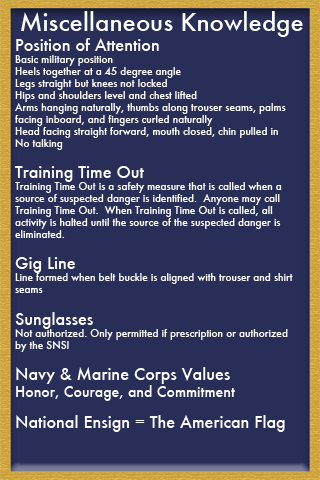
<style>
.page{position:relative;width:320px;height:480px;background:#292e59}
.page>*{position:absolute;margin:0}
.t1{font:24px "Futura-Medium";color:#ffffff}
.t2{font:10px "Futura-Medium";color:#ffffff}
.t3{font:16px "Futura-Medium";color:#ffffff}
.t4{font:14px "Futura-Medium";color:#ffffff}
</style>
<div class="page">
<p class="t1" style="left:21px;top:11px;width:282px;height:26px">Miscellaneous Knowledge</p>
<p class="t2" style="left:14px;top:38px;width:279px;height:394px"><span class="t3">Position of Attention <br></span>Basic military position<br>Heels together at a 45 degree angle<br>Legs straight but knees not locked<br>Hips and shoulders level and chest lifted<br>Arms hanging naturally, thumbs along trouser seams, palms <br>facing inboard, and fingers curled naturally<br>Head facing straight forward, mouth closed, chin pulled in<br>No talking<br><br><span class="t3">Training Time Out <br></span>Training Time Out is a safety measure that is called when a <br>source of suspected danger is identified.  Anyone may call <br>Training Time Out.  When Training Time Out is called, all <br>activity is halted until the source of the suspected danger is <br>eliminated.<br><br><span class="t3">Gig Line <br></span>Line formed when belt buckle is aligned with trouser and shirt <br>seams<br><br><span class="t3">Sunglasses<br></span>Not authorized. Only permitted if prescription or authorized <br>by the SNSI<br><br><span class="t3">Navy &amp; Marine Corps Values <br></span><span class="t4">Honor, Courage, and Commitment<br><br></span><span class="t3">National Ensign = The American Flag</span></p>
</div>
